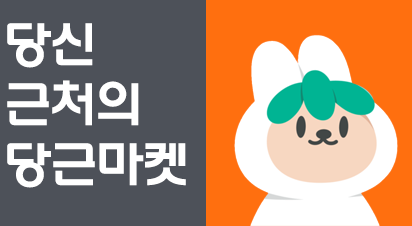
<style>
.page{position:relative;width:412px;height:226px;background:#4d5159}
.page>*{position:absolute;margin:0}
.t1{font:48px/60px "Korail-Round-Gothic-Bold";letter-spacing:-0.04em;color:#ffffff}
</style>
<div class="page">
<p class="t1" style="left:7px;top:23px;width:179px;height:165px">당신 <br>근처의<br>당근마켓</p>
</div>
